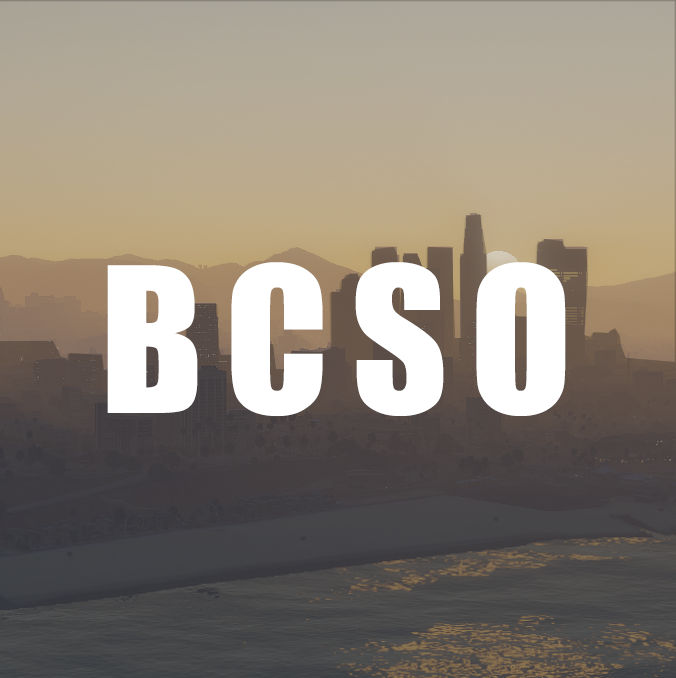
<style>
.page{position:relative;width:676px;height:678px}
.page>*{position:absolute;margin:0}
.t1{font:186.7px "Impact";letter-spacing:0.12em;color:#ffffff}
</style>
<div class="page">
<p class="t1" style="left:107px;top:262px;width:459px;height:154px">BCSO</p>
</div>
